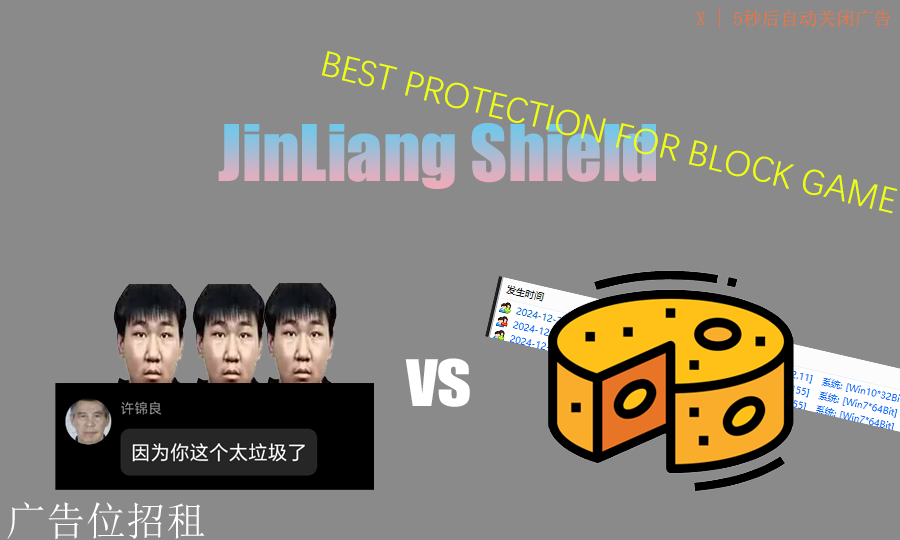
<style>
.page{position:relative;width:900px;height:540px;background:#8a8a8a}
.page>*{position:absolute;margin:0}
.t1{font:18.7px "SimSun";color:#ff702a}
.t2{font:36px "DengXian";color:#efff08}
.t3{font:72px "Impact"}
.t4{font:72px "Impact";color:#ffffff}
.t5{font:40px "SimSun";color:#ffffff}
</style>
<div class="page">
<p class="t1" style="left:696px;top:9px;width:195px;height:19px">X | 5秒后自动关闭广告</p>
<p class="t2" style="left:321px;top:51px;width:577px;height:163px;rotate:14deg">BEST PROTECTION FOR BLOCK GAME</p>
<p class="t3" style="left:218px;top:123px;width:438px;height:66px">JinLiang Shield</p>
<p class="t4" style="left:405px;top:358px;width:65px;height:49px">vs</p>
<p class="t5" style="left:7px;top:502px;width:198px;height:38px">广告位招租</p>
</div>
